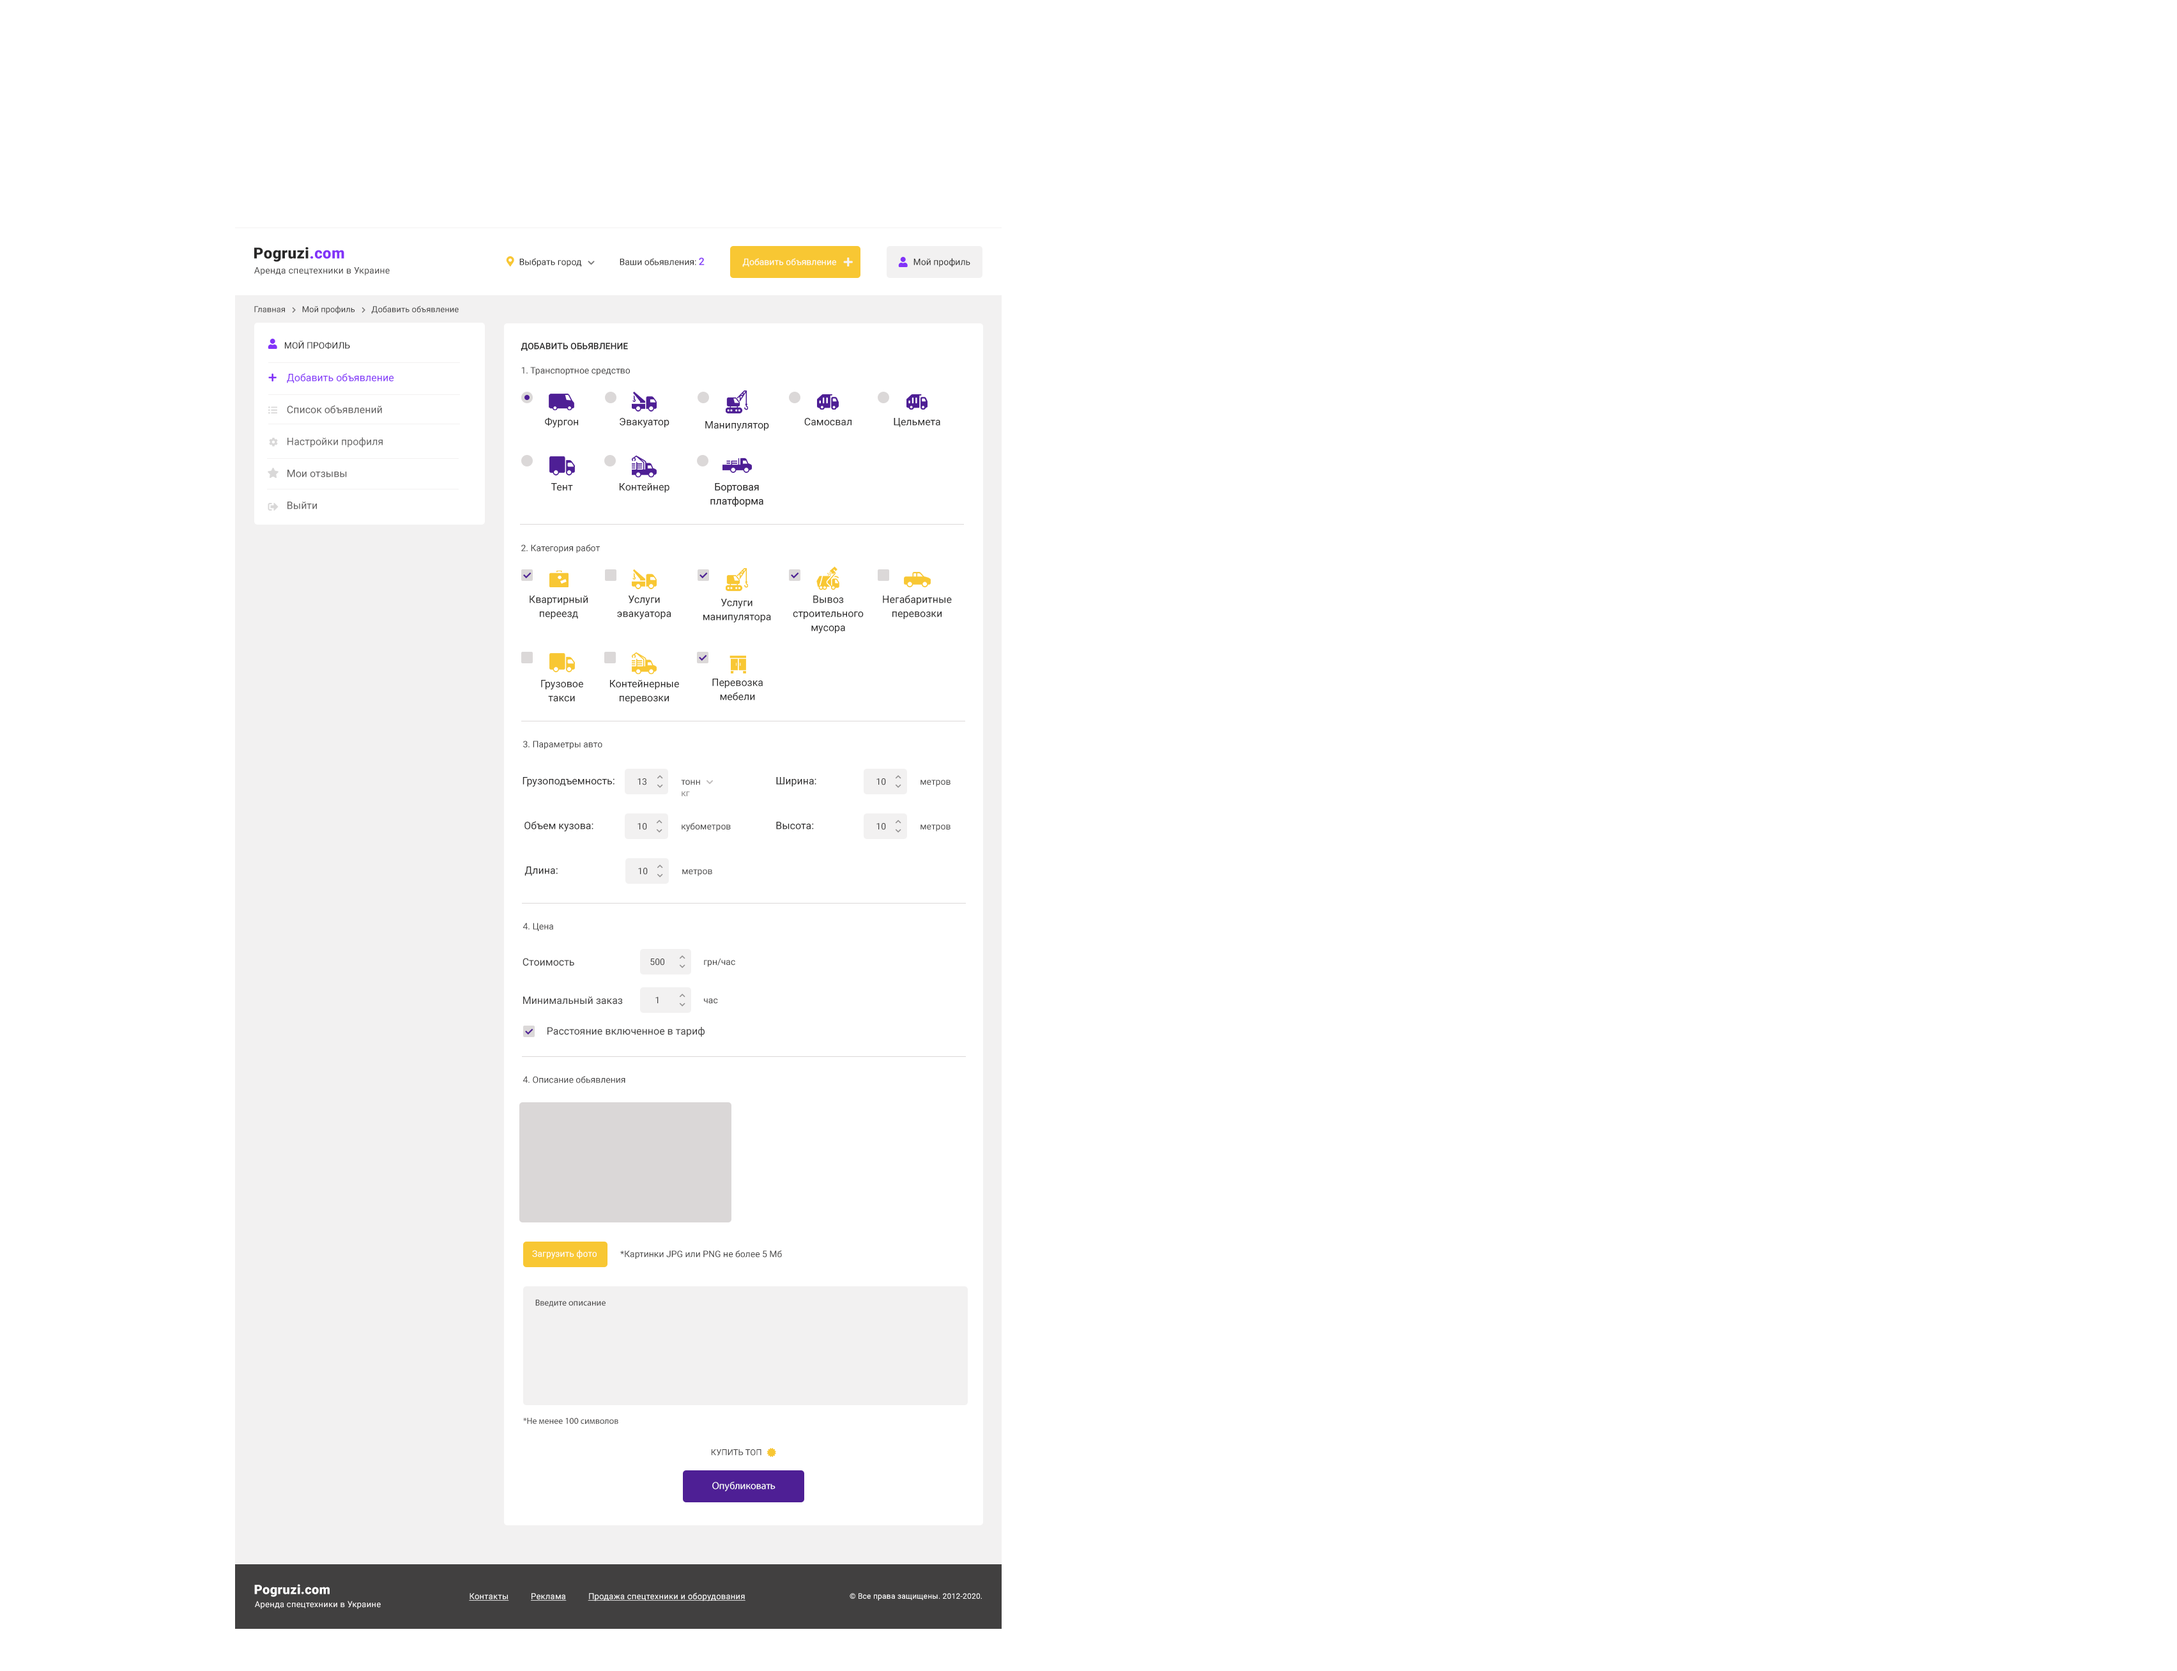
<style>
.page{position:relative;width:2177px;height:1671px;background:#ffffff}
.page>*{position:absolute;margin:0}
.t1{font:15.3px "Roboto-Black";letter-spacing:0.02em;color:#292828}
.t2{font:15.3px "Roboto-Black";letter-spacing:0.02em;color:#8233f8}
.t3{font:8.9px "Roboto-Regular";color:#2b2a2a}
.t4{font:10.2px "Roboto-Medium";color:#8233f8}
.t5{font:8.9px "Roboto-Regular";letter-spacing:0.02em;color:#414040}
.t6{font:8.9px "Roboto-Regular";color:#2a2a29}
.t7{font:8.9px "Roboto-Regular";color:#ffffff}
.t8{font:8.3px "Roboto-Regular";color:#414040}
.t9{font:8.9px "Roboto-Regular";color:#292828;text-transform:uppercase}
.t10{font:8.9px "Roboto-Medium";color:#292828;text-transform:uppercase}
.t11{font:10.2px/31.9px "Roboto-Regular";color:#8233f8}
.t12{font:10.2px/31.9px "Roboto-Regular";color:#615f5f}
.t13{font:10.2px/31.9px "Roboto-Regular";color:#676666}
.t14{font:8.9px "Roboto-Regular";color:#414040}
.t15{font:10.2px "Roboto-Regular";color:#292828}
.t16{font:10.2px/14.1px "Roboto-Regular";color:#292828}
.t17{font:8.9px "Roboto-Regular";color:#878686}
.t18{font:10.2px "Roboto-Regular";color:#414040}
.t19{font:8.9px "MyriadPro-Regular";color:#414040}
.t20{font:8.3px "Roboto-Regular";color:#414040;text-transform:uppercase}
.t21{font:10.2px "MyriadPro-Regular";color:#ffffff}
.t22{font:12.8px "Roboto-Black";letter-spacing:0.02em;color:#ffffff}
.t23{font:8.3px "Roboto-Regular";letter-spacing:0.02em;color:#fdfafa}
.t24{font:8.3px "Roboto-Regular";letter-spacing:0.02em;color:#ffffff;text-decoration:underline}
.t25{font:7.7px "Roboto-Regular";letter-spacing:0.02em;color:#ffffff}
</style>
<div class="page">
<p class="t1" style="left:254px;top:247px;width:90px;height:15px">Pogruzi<span class="t2">.com</span></p>
<p class="t3" style="left:620px;top:257px;width:85px;height:8px">Ваши обьявления: <span class="t4">2</span></p>
<p class="t5" style="left:254px;top:267px;width:136px;height:8px">Аренда спецтехники в Украине</p>
<p class="t6" style="left:519px;top:258px;width:62px;height:9px">Выбрать город</p>
<p class="t7" style="left:742px;top:258px;width:94px;height:9px">Добавить объявление</p>
<p class="t6" style="left:914px;top:258px;width:57px;height:9px">Мой профиль</p>
<p class="t8" style="left:254px;top:305px;width:205px;height:9px">Главная        Мой профиль        Добавить объявление</p>
<p class="t9" style="left:285px;top:341px;width:65px;height:8px">Мой профиль</p>
<p class="t10" style="left:521px;top:342px;width:107px;height:9px">Добавить обьявление</p>
<p class="t11" style="left:287px;top:373px;width:107px;height:136px">Добавить объявление<br><span class="t12">Список объявлений<br></span><span class="t13">Настройки профиля<br></span><span class="t12">Мои отзывы<br>Выйти</span></p>
<p class="t14" style="left:521px;top:367px;width:109px;height:9px">1. Транспортное средство</p>
<p class="t15" style="left:545px;top:417px;width:33px;height:10px">Фургон</p>
<p class="t15" style="left:620px;top:418px;width:50px;height:9px">Эвакуатор</p>
<p class="t15" style="left:705px;top:421px;width:64px;height:10px">Манипулятор</p>
<p class="t15" style="left:804px;top:418px;width:48px;height:8px">Самосвал</p>
<p class="t15" style="left:894px;top:418px;width:47px;height:9px">Цельмета</p>
<p class="t15" style="left:551px;top:483px;width:22px;height:8px">Тент</p>
<p class="t15" style="left:620px;top:483px;width:50px;height:10px">Контейнер</p>
<p class="t14" style="left:521px;top:544px;width:79px;height:9px">2. Категория работ</p>
<p class="t16" style="left:530px;top:595px;width:58px;height:24px;text-align:center">Квартирный<br>переезд</p>
<p class="t16" style="left:617px;top:595px;width:55px;height:24px;text-align:center">Услуги<br>эвакуатора</p>
<p class="t16" style="left:703px;top:599px;width:68px;height:23px;text-align:center">Услуги<br>манипулятора</p>
<p class="t16" style="left:793px;top:595px;width:71px;height:38px;text-align:center">Вывоз<br>строительного<br>мусора</p>
<p class="t16" style="left:883px;top:595px;width:69px;height:24px;text-align:center">Негабаритные<br>перевозки</p>
<p class="t16" style="left:541px;top:680px;width:42px;height:22px;text-align:center">Грузовое<br>такси</p>
<p class="t16" style="left:610px;top:680px;width:69px;height:23px;text-align:center">Контейнерные<br>перевозки</p>
<p class="t16" style="left:712px;top:679px;width:51px;height:21px;text-align:center">Перевозка<br>мебели</p>
<p class="t14" style="left:523px;top:741px;width:80px;height:8px">3. Параметры авто</p>
<p class="t15" style="left:523px;top:777px;width:92px;height:10px">Грузоподъемность:</p>
<p class="t14" style="left:638px;top:778px;width:9px;height:7px">13</p>
<p class="t14" style="left:681px;top:779px;width:19px;height:6px">тонн</p>
<p class="t15" style="left:776px;top:777px;width:41px;height:10px">Ширина:</p>
<p class="t14" style="left:877px;top:778px;width:9px;height:7px">10</p>
<p class="t14" style="left:921px;top:779px;width:30px;height:8px">метров</p>
<p class="t17" style="left:682px;top:791px;width:8px;height:5px">кг</p>
<p class="t15" style="left:525px;top:821px;width:69px;height:10px">Объем кузова:</p>
<p class="t15" style="left:776px;top:822px;width:38px;height:7px">Высота:</p>
<p class="t14" style="left:638px;top:823px;width:9px;height:7px">10</p>
<p class="t14" style="left:682px;top:822px;width:49px;height:9px">кубометров</p>
<p class="t14" style="left:877px;top:823px;width:9px;height:7px">10</p>
<p class="t14" style="left:921px;top:824px;width:30px;height:7px">метров</p>
<p class="t15" style="left:525px;top:866px;width:33px;height:10px">Длина:</p>
<p class="t14" style="left:638px;top:868px;width:10px;height:7px">10</p>
<p class="t14" style="left:682px;top:869px;width:30px;height:7px">метров</p>
<p class="t14" style="left:523px;top:923px;width:30px;height:8px">4. Цена</p>
<p class="t18" style="left:523px;top:958px;width:51px;height:8px">Стоимость</p>
<p class="t14" style="left:650px;top:958px;width:14px;height:7px">500</p>
<p class="t14" style="left:704px;top:958px;width:31px;height:9px">грн/час</p>
<p class="t18" style="left:523px;top:996px;width:100px;height:8px">Минимальный заказ</p>
<p class="t14" style="left:656px;top:997px;width:3px;height:6px">1</p>
<p class="t14" style="left:704px;top:998px;width:14px;height:6px">час</p>
<p class="t18" style="left:548px;top:1027px;width:157px;height:10px">Расстояние включенное в тариф</p>
<p class="t14" style="left:523px;top:1076px;width:103px;height:7px">4. Описание обьявления</p>
<p class="t7" style="left:532px;top:1250px;width:65px;height:9px">Загрузить фото</p>
<p class="t14" style="left:620px;top:1250px;width:162px;height:9px">*Картинки JPG или PNG не более 5 Мб</p>
<p class="t19" style="left:535px;top:1299px;width:71px;height:8px">Введите описание</p>
<p class="t19" style="left:523px;top:1417px;width:95px;height:7px">*Не менее 100 символов</p>
<p class="t20" style="left:712px;top:1449px;width:50px;height:6px">Купить топ</p>
<p class="t21" style="left:712px;top:1481px;width:64px;height:10px">Опубликовать</p>
<p class="t22" style="left:254px;top:1584px;width:76px;height:13px">Pogruzi.com</p>
<p class="t23" style="left:255px;top:1601px;width:126px;height:8px">Аренда спецтехники в Украине</p>
<p class="t24" style="left:469px;top:1592px;width:277px;height:9px">Контакты          Реклама          Продажа спецтехники и оборудования</p>
<p class="t25" style="left:850px;top:1593px;width:132px;height:8px">© Все права защищены. 2012-2020.</p>
</div>
